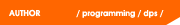
<style>
.page{position:relative;width:180px;height:25px;background:#ff6600}
.page>*{position:absolute;margin:0}
.t1{font:8px "Atlanta-Demi";color:#ffffff}
</style>
<div class="page">
<p class="t1" style="left:9px;top:9px;width:32px;height:8px">AUTHOR</p>
<p class="t1" style="left:76px;top:10px;width:88px;height:8px">/ programming / dps /</p>
</div>
